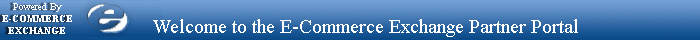
<style>
.page{position:relative;width:700px;height:40px}
.page>*{position:absolute;margin:0}
.t1{font:20px "TimesNewRomanPSMT";color:#ffffff}
</style>
<div class="page">
<p class="t1" style="left:153px;top:19px;width:425px;height:18px">Welcome to the E-Commerce Exchange Partner Portal</p>
</div>
